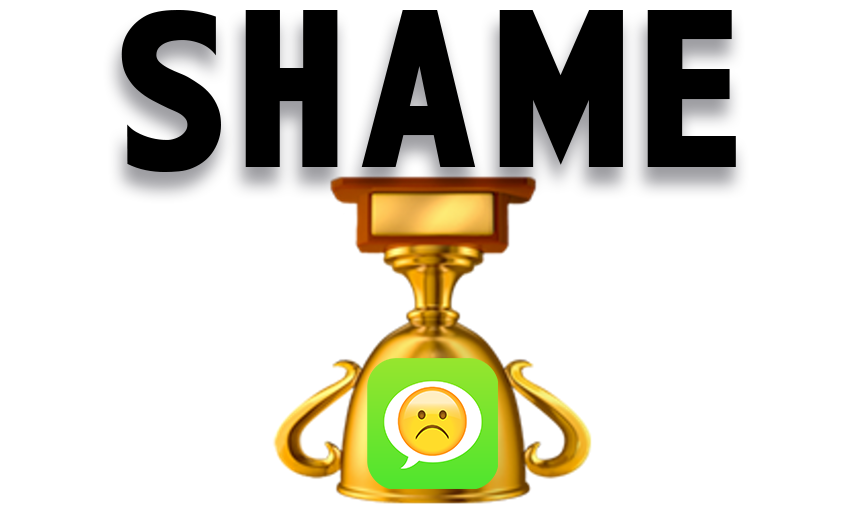
<style>
.page{position:relative;width:864px;height:512px;background:#ffffff}
.page>*{position:absolute;margin:0}
.t1{font:196.3px "WagnerZip-Change";letter-spacing:0.025em;color:#000000}
</style>
<div class="page">
<p class="t1" style="left:121px;top:10px;width:615px;height:162px">SHAME</p>
</div>
